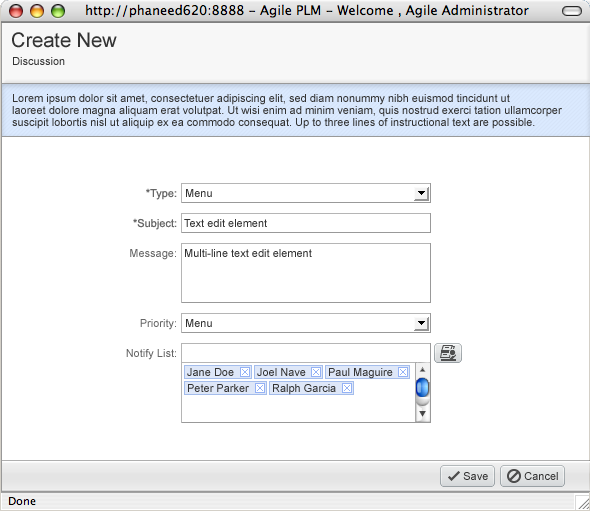
<style>
.page{position:relative;width:590px;height:511px;background:#ffffff}
.page>*{position:absolute;margin:0}
.t1{font:20px "ArialMT";color:#333333}
.t2{font:11px "ArialMT";color:#333333}
.t3{font:11px/12px "ArialMT";color:#333333}
.t4{font:11px "ArialMT";color:#666666}
</style>
<div class="page">
<p class="t1" style="left:12px;top:32px;width:105px;height:16px">Create New</p>
<p class="t2" style="left:13px;top:57px;width:52px;height:8px">Discussion</p>
<p class="t3" style="left:12px;top:94px;width:550px;height:35px">Lorem ipsum dolor sit amet, consectetuer adipiscing elit, sed diam nonummy nibh euismod tincidunt ut <br>laoreet dolore magna aliquam erat volutpat. Ut wisi enim ad minim veniam, quis nostrud exerci tation ullamcorper <br>suscipit lobortis nisl ut aliquip ex ea commodo consequat. Up to three lines of instructional text are possible.</p>
<p class="t4" style="left:146px;top:188px;width:31px;height:12px">*Type:</p>
<p class="t2" style="left:186px;top:189px;width:26px;height:8px">Menu</p>
<p class="t4" style="left:133px;top:218px;width:44px;height:12px">*Subject:</p>
<p class="t2" style="left:184px;top:219px;width:83px;height:8px">Text edit element</p>
<p class="t4" style="left:130px;top:249px;width:46px;height:11px">Message:</p>
<p class="t2" style="left:185px;top:249px;width:127px;height:8px">Multi-line text edit element</p>
<p class="t4" style="left:140px;top:319px;width:36px;height:11px">Priority:</p>
<p class="t2" style="left:186px;top:319px;width:26px;height:8px">Menu</p>
<p class="t4" style="left:126px;top:349px;width:50px;height:11px">Notify List:</p>
<p class="t2" style="left:463px;top:472px;width:25px;height:8px">Save</p>
<p class="t2" style="left:524px;top:472px;width:34px;height:8px">Cancel</p>
</div>
